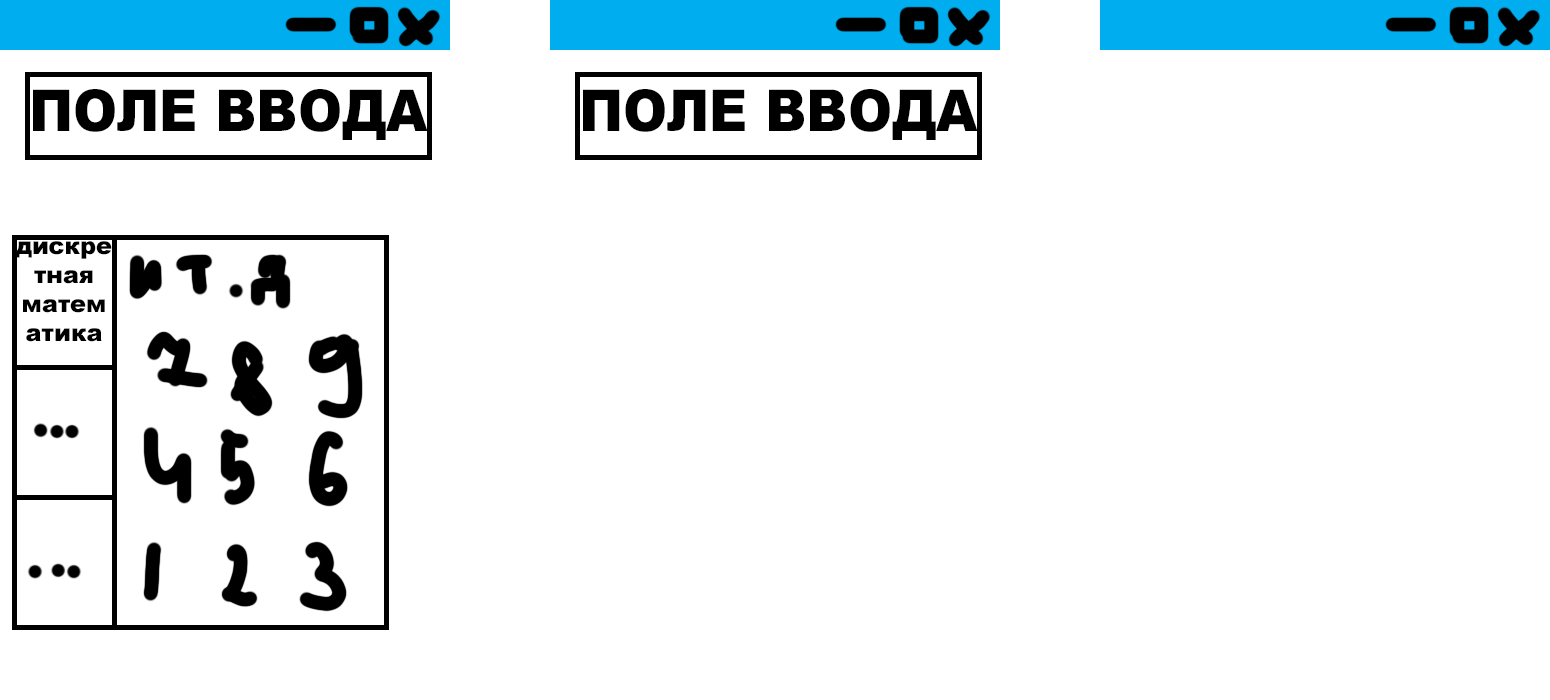
<style>
.page{position:relative;width:1550px;height:700px;background:#ffffff}
.page>*{position:absolute;margin:0}
.t1{font:57.8px "Arial-Black";color:#000000;scale:0.92 1}
.t2{font:24px "Arial-Black";color:#000000}
</style>
<div class="page">
<p class="t1" style="left:33px;top:89px;width:395px;height:51px">ПОЛЕ ВВОДА</p>
<p class="t1" style="left:583px;top:89px;width:395px;height:51px">ПОЛЕ ВВОДА</p>
<p class="t2" style="left:16px;top:241px;width:96px;height:101px;text-align:center">дискретная математика</p>
</div>
